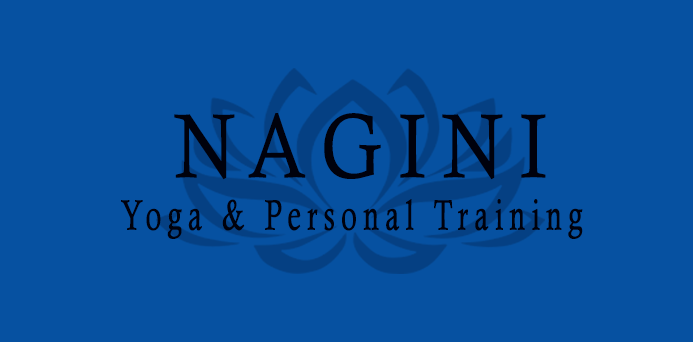
<style>
.page{position:relative;width:693px;height:342px;background:#0651a1}
.page>*{position:absolute;margin:0}
.t1{font:90.5px "CalistoMT";letter-spacing:0.2em;color:#030303;font-weight:bold;scale:0.82 1}
.t2{font:42.5px "CalistoMT";letter-spacing:0.2em;color:#030303;font-weight:bold;scale:0.67 1}
</style>
<div class="page">
<p class="t1" style="left:174px;top:113px;width:372px;height:67px">NAGINI</p>
<p class="t2" style="left:121px;top:199px;width:462px;height:40px">Yoga &amp; Personal Training</p>
</div>
